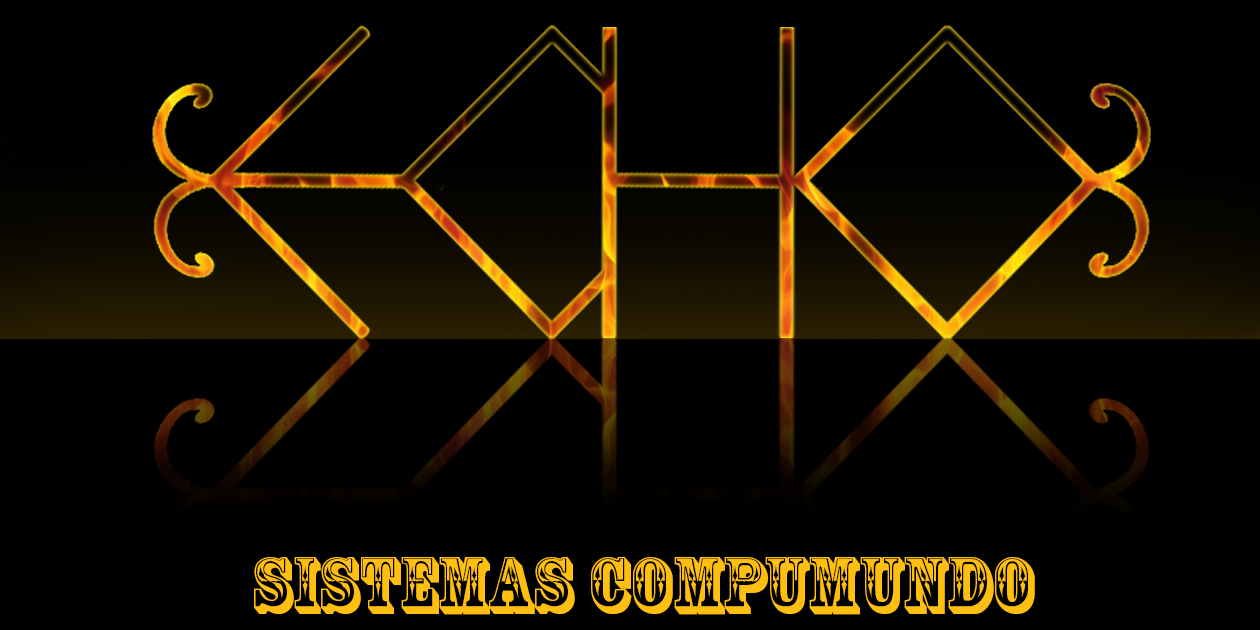
<style>
.page{position:relative;width:1260px;height:630px;background:#000000}
.page>*{position:absolute;margin:0}
.t1{font:75px "RosewoodStd-Regular";color:#ffbf10}
</style>
<div class="page">
<p class="t1" style="left:254px;top:557px;width:781px;height:58px">SISTEMAS COMPUMUNDO</p>
</div>
